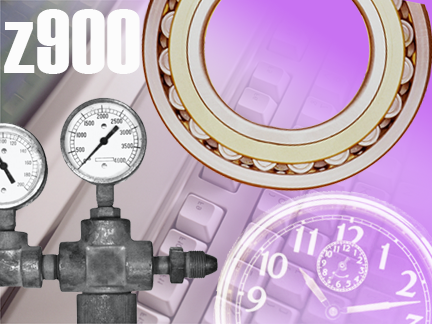
<style>
.page{position:relative;width:432px;height:324px}
.page>*{position:absolute;margin:0}
.t1{font:90px "Haettenschweiler";letter-spacing:0.01em;color:#fcfcfc}
</style>
<div class="page">
<p class="t1" style="left:4px;top:9px;width:136px;height:65px">z900</p>
</div>
